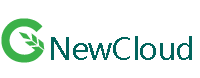
<style>
.page{position:relative;width:200px;height:78px;background:#ffffff}
.page>*{position:absolute;margin:0}
.t1{font:30px "MicrosoftYaHei";letter-spacing:-0.01em;color:#02655d}
</style>
<div class="page">
<p class="t1" style="left:51px;top:36px;width:141px;height:24px">NewCloud</p>
</div>
